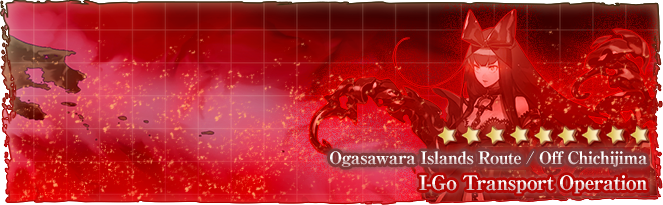
<style>
.page{position:relative;width:663px;height:205px}
.page>*{position:absolute;margin:0}
.t1{font:17px "RyuminPro-ExBold";letter-spacing:-0.04em}
.t2{font:20px "RyuminPro-ExBold";letter-spacing:-0.04em}
</style>
<div class="page">
<p class="t1" style="left:330px;top:151px;width:318px;height:16px">Ogasawara Islands Route / Off Chichijima</p>
<p class="t2" style="left:419px;top:175px;width:228px;height:19px">I-Go Transport Operation</p>
</div>
